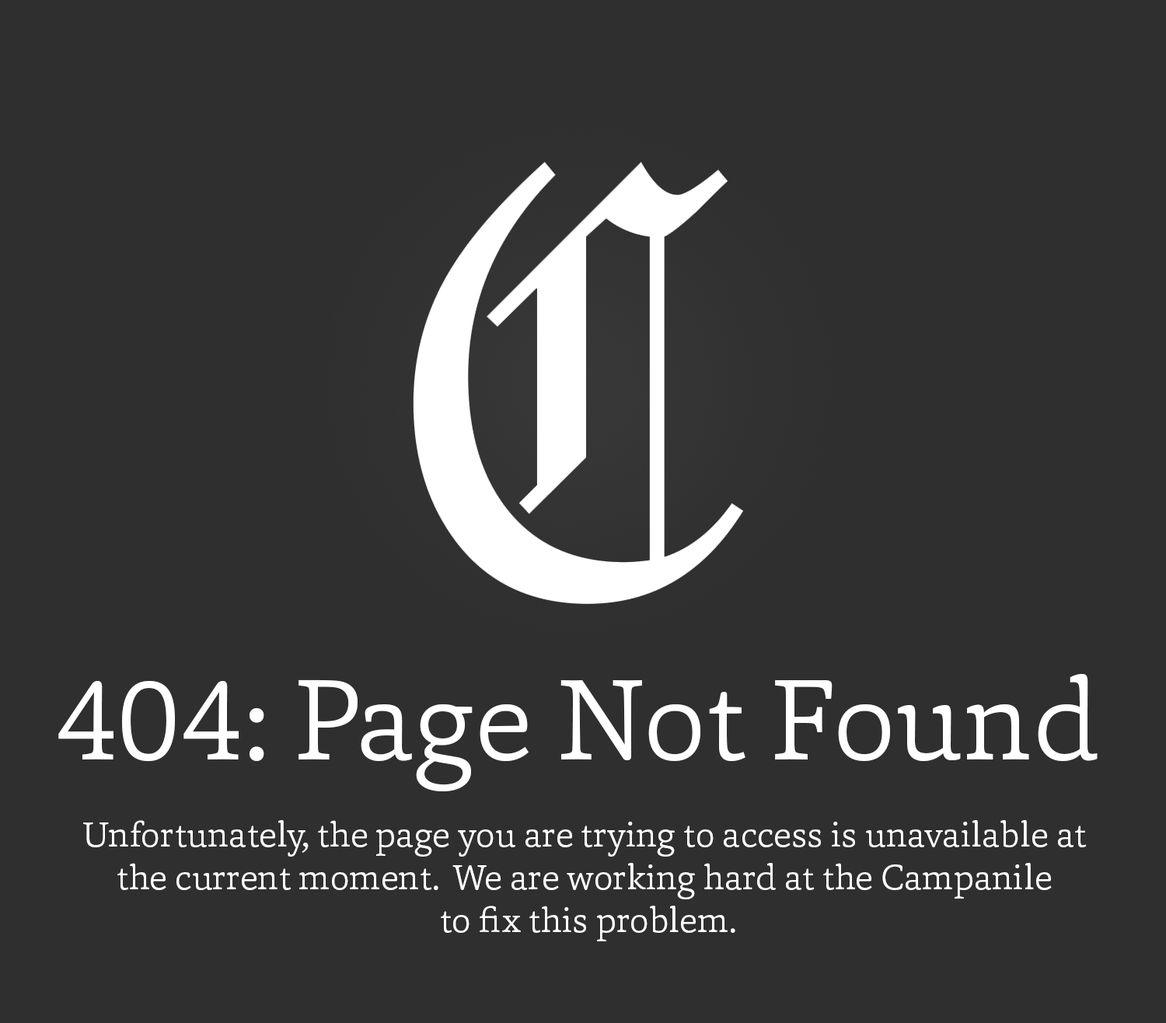
<style>
.page{position:relative;width:1166px;height:1023px;background:#302f2f}
.page>*{position:absolute;margin:0}
.t1{font:116.6px "Capita-Light";color:#ffffff}
.t2{font:35.6px "Capita-Light";color:#ffffff}
</style>
<div class="page">
<p class="t1" style="left:58px;top:674px;width:1039px;height:117px">404: Page Not Found</p>
<p class="t2" style="left:83px;top:820px;width:1004px;height:121px;text-align:center">Unfortunately, the page you are trying to access is unavailable at <br>the current moment.  We are working hard at the Campanile <br>to fix this problem.</p>
</div>
